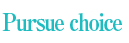
<style>
.page{position:relative;width:129px;height:43px;background:#ffffff}
.page>*{position:absolute;margin:0}
.t1{font:24px "RyuminPro-ExBold";letter-spacing:-0.08em;color:#1dbcc0;scale:0.9 1}
</style>
<div class="page">
<p class="t1" style="left:2px;top:13px;width:120px;height:19px">Pursue choice</p>
</div>
